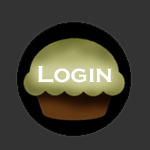
<style>
.page{position:relative;width:150px;height:150px;background:#333333}
.page>*{position:absolute;margin:0}
.t1{font:24px "CopperplateGothic-Bold";color:#ffffff}
</style>
<div class="page">
<p class="t1" style="left:38px;top:66px;width:74px;height:17px">Login</p>
</div>
